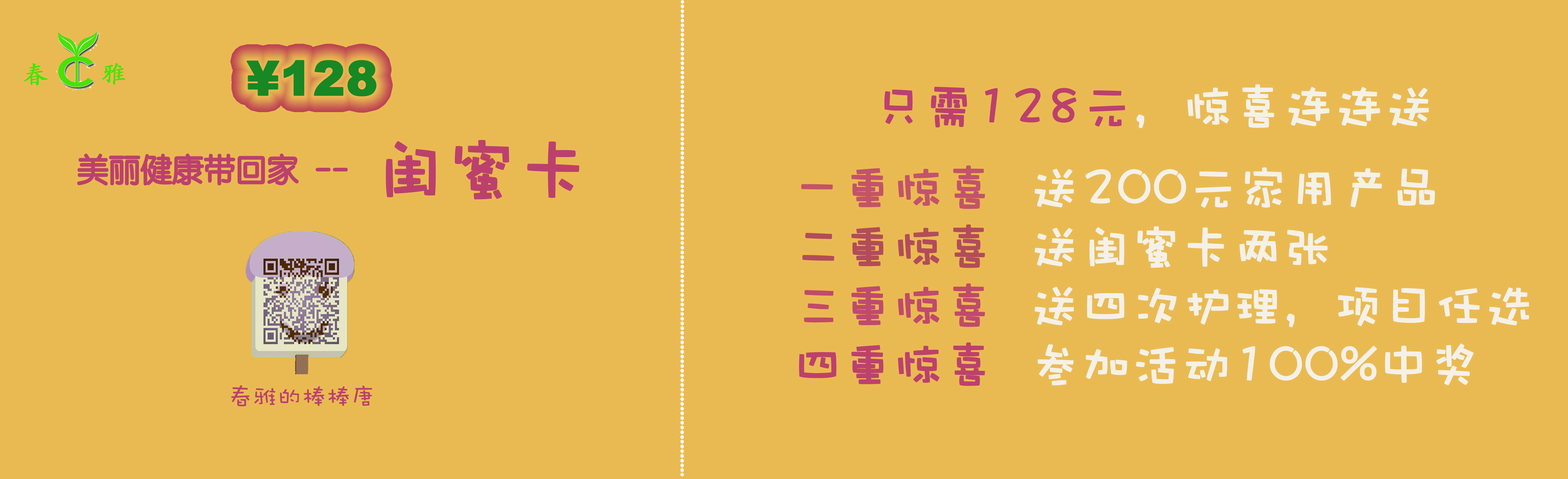
<style>
.page{position:relative;width:1568px;height:479px;background:#eaba52}
.page>*{position:absolute;margin:0}
.t1{font:24.6px "STKaitiSC-Regular";color:#48e303;font-weight:bold}
.t2{font:47.6px "Arial-Black";color:#178824;font-weight:bold}
.t3{font:49.2px "DFWaWaSC-W5";color:#bc406d;font-weight:bold}
.t4{font:49.2px "DFWaWaSC-W5";color:#f5f1e8;font-weight:bold}
.t5{font:70.7px "DFWaWaSC-W5";color:#bc406d;font-weight:bold}
.t6{font:31.7px "STYuanti-TC-Regular";color:#bc406d}
.t7{font:49.2px "DFWaWaSC-W5";color:#c35369;font-weight:bold}
.t8{font:49.2px "DFWaWaSC-W5";color:#b24c5a;font-weight:bold}
.t9{font:49.2px "DFWaWaSC-W5";color:#c04a6b;font-weight:bold}
.t10{font:49.2px "DFWaWaSC-W5";color:#bc416d;font-weight:bold}
.t11{font:24.6px "DFWaWaSC-W5";color:#bc406d;font-variant:small-caps}
</style>
<div class="page">
<p class="t1" style="left:24px;top:63px;width:24px;height:22px">春</p>
<p class="t1" style="left:102px;top:63px;width:23px;height:22px">雅</p>
<p class="t2" style="left:246px;top:60px;width:130px;height:37px">¥128</p>
<p class="t3" style="left:884px;top:84px;width:545px;height:44px">只需128元<span class="t4">，惊喜连连送</span></p>
<p class="t5" style="left:386px;top:140px;width:193px;height:59px">闺蜜卡</p>
<p class="t6" style="left:78px;top:154px;width:269px;height:31px">美丽健康带回家  --</p>
<p class="t4" style="left:799px;top:165px;width:730px;height:221px"><span class="t7">一重惊喜  </span>送200元家用产品<br><span class="t8">二重惊喜  </span>送闺蜜卡两张<br><span class="t9">三重惊喜  </span>送四次护理，项目任选<br><span class="t10">四重惊喜  </span>参加活动100%中奖</p>
<p class="t11" style="left:231px;top:385px;width:141px;height:22px">春雅的棒棒唐</p>
</div>
